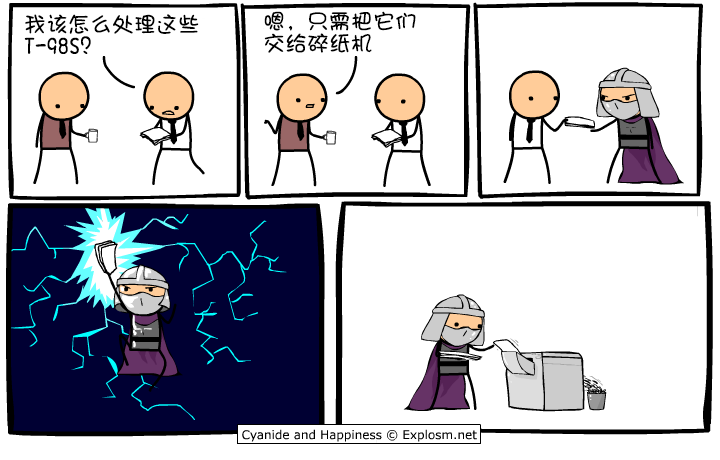
<style>
.page{position:relative;width:720px;height:460px;background:#ffffff}
.page>*{position:absolute;margin:0}
.t1{font:22px/22px "DFShaoNvW5";color:#000000}
</style>
<div class="page">
<p class="t1" style="left:24px;top:14px;width:175px;height:41px">我该怎么处理这些<br>T-98S？</p>
<p class="t1" style="left:264px;top:11px;width:152px;height:42px">嗯，只需把它们<br>交给碎纸机</p>
</div>
